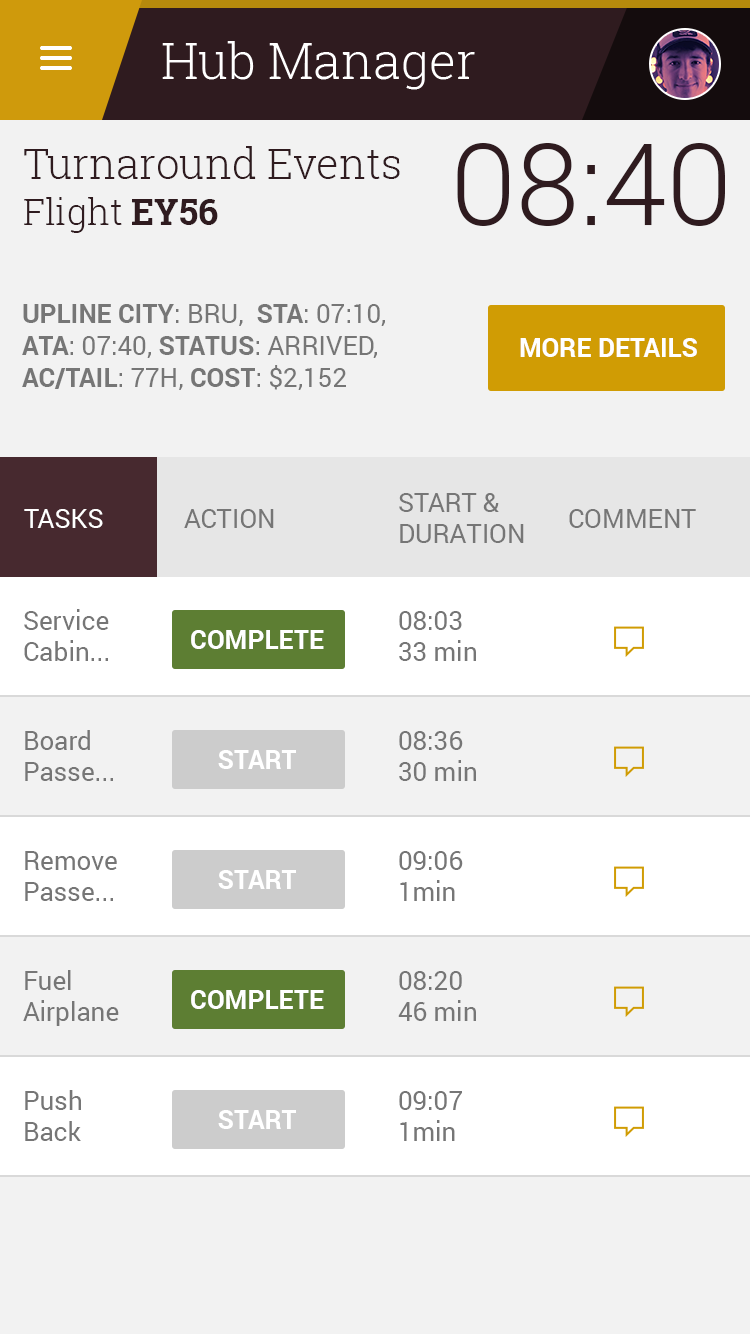
<style>
.page{position:relative;width:750px;height:1334px;background:#f2f2f2}
.page>*{position:absolute;margin:0}
.t1{font:42px "RobotoSlab-Light";color:#2f1b1f}
.t2{font:113.8px "Roboto-Light";color:#2f1b1f;text-transform:uppercase}
.t3{font:36px "RobotoSlab-Light";color:#2f1b1f}
.t4{font:36px "RobotoSlab-Bold";color:#2f1b1f}
.t5{font:26px/32px "Roboto-Bold";color:#767676;text-transform:uppercase}
.t6{font:26px/32px "Roboto-Regular";color:#767676;text-transform:uppercase}
.t7{font:26px "Roboto-Bold";color:#ffffff;text-transform:uppercase}
.t8{font:26px "Roboto-Regular";color:#767676;text-transform:uppercase}
.t9{font:26px "Roboto-Regular";color:#ffffff;text-transform:uppercase}
.t10{font:26px "Roboto-Regular";color:#767676}
</style>
<div class="page">
<p class="t1" style="left:24px;top:146px;width:376px;height:33px">Turnaround Events</p>
<p class="t2" style="left:457px;top:143px;width:268px;height:83px">08:40</p>
<p class="t3" style="left:24px;top:197px;width:194px;height:36px">Flight <span class="t4">EY56</span></p>
<p class="t5" style="left:22px;top:304px;width:363px;height:86px">Upline City<span class="t6">: BRU,  </span>STA<span class="t6">: 07:10, <br></span>ATA<span class="t6">: 07:40, </span>Status<span class="t6">: Arrived, <br></span>AC/TAil<span class="t6">: 77H, </span>Cost<span class="t6">: $2,152</span></p>
<p class="t7" style="left:520px;top:338px;width:177px;height:19px">MORE details</p>
<p class="t8" style="left:399px;top:493px;width:125px;height:50px">Start &amp;<br>Duration</p>
<p class="t9" style="left:24px;top:509px;width:79px;height:19px">tasks</p>
<p class="t8" style="left:184px;top:509px;width:90px;height:19px">Action</p>
<p class="t8" style="left:569px;top:509px;width:127px;height:19px">Comment</p>
<p class="t10" style="left:24px;top:609px;width:85px;height:52px">Service<br>Cabin...</p>
<p class="t10" style="left:399px;top:611px;width:77px;height:50px">08:03<br>33 min</p>
<p class="t7" style="left:191px;top:630px;width:133px;height:19px">Complete</p>
<p class="t10" style="left:25px;top:730px;width:88px;height:51px">Board<br>Passe...</p>
<p class="t10" style="left:399px;top:731px;width:77px;height:50px">08:36<br>30 min</p>
<p class="t7" style="left:218px;top:750px;width:78px;height:19px">Start</p>
<p class="t10" style="left:25px;top:851px;width:92px;height:50px">Remove<br>Passe...</p>
<p class="t10" style="left:399px;top:851px;width:64px;height:50px">09:06<br>1min</p>
<p class="t7" style="left:218px;top:870px;width:78px;height:19px">Start</p>
<p class="t10" style="left:23px;top:970px;width:96px;height:56px">Fuel<br>Airplane</p>
<p class="t10" style="left:398px;top:971px;width:78px;height:50px">08:20<br>46 min</p>
<p class="t7" style="left:191px;top:990px;width:133px;height:19px">Complete</p>
<p class="t10" style="left:25px;top:1090px;width:56px;height:51px">Push<br>Back</p>
<p class="t10" style="left:399px;top:1091px;width:63px;height:50px">09:07<br>1min</p>
<p class="t7" style="left:218px;top:1110px;width:78px;height:19px">Start</p>
</div>
